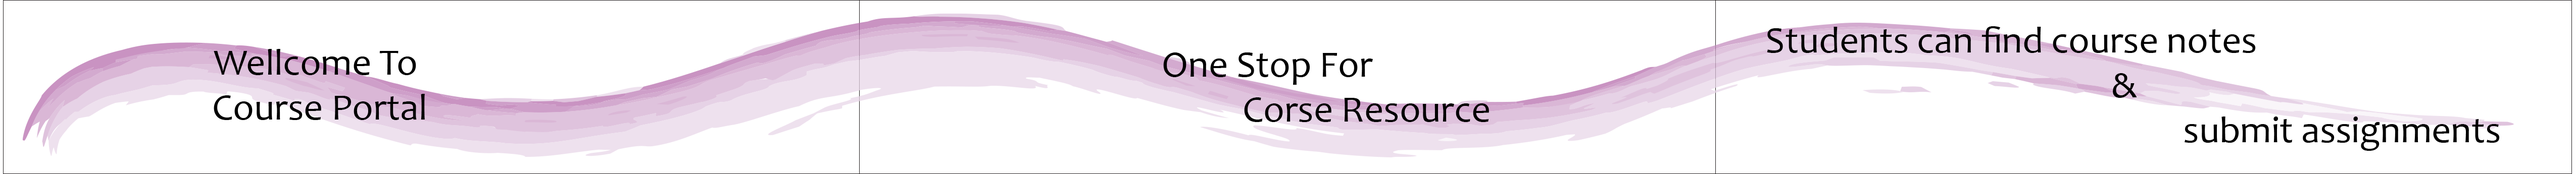
<style>
.page{position:relative;width:2576px;height:174px;background:#ffffff}
.page>*{position:absolute;margin:0}
.t1{font:9px "Candara";color:#000000}
</style>
<div class="page">
<p class="t1" style="left:1767px;top:26px;width:732px;height:125px;text-align:center">Students can find course notes <br>        &amp;<br>                        submit assignments</p>
<p class="t1" style="left:214px;top:49px;width:211px;height:71px;text-align:center">Wellcome To <br>Course Portal</p>
<p class="t1" style="left:1163px;top:53px;width:326px;height:69px;text-align:center">One Stop For <br>       Corse Resource</p>
</div>
